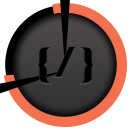
<style>
.page{position:relative;width:130px;height:130px;background:#ffffff}
.page>*{position:absolute;margin:0}
.t1{font:58.3px "Copperplate-Bold";color:#111111}
</style>
<div class="page">
<p class="t1" style="left:36px;top:46px;width:59px;height:39px">{/}</p>
</div>
